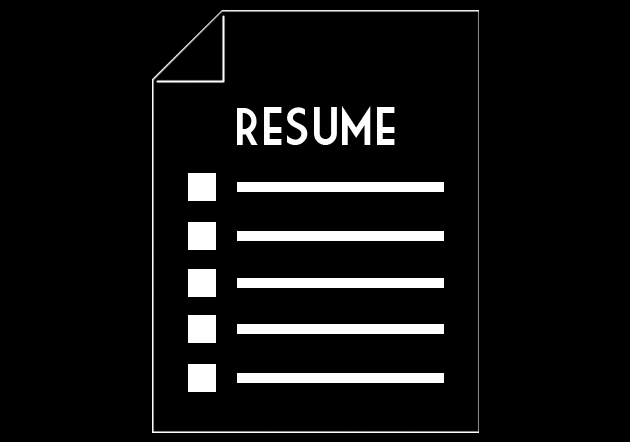
<style>
.page{position:relative;width:630px;height:442px;background:#000000}
.page>*{position:absolute;margin:0}
.t1{font:52.1px "MarketDeco";color:#ffffff}
</style>
<div class="page">
<p class="t1" style="left:237px;top:106px;width:158px;height:39px">Resume</p>
</div>
